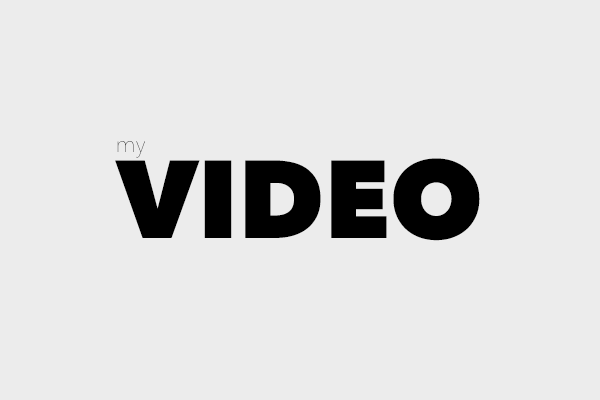
<style>
.page{position:relative;width:600px;height:400px;background:#ececec}
.page>*{position:absolute;margin:0}
.t1{font:23px "AvenirNext-UltraLight"}
.t2{font:109px "AvenirNext-Heavy";color:#000000}
</style>
<div class="page">
<p class="t1" style="left:117px;top:141px;width:28px;height:17px">my</p>
<p class="t2" style="left:115px;top:158px;width:365px;height:83px">VIDEO</p>
</div>
